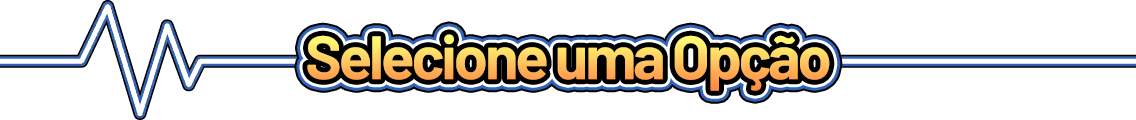
<style>
.page{position:relative;width:1136px;height:120px;background:#ffffff}
.page>*{position:absolute;margin:0}
.t1{font:61.3px "Barlow-Bold";letter-spacing:-0.05em}
</style>
<div class="page">
<p class="t1" style="left:307px;top:34px;width:523px;height:57px">Selecione uma Opção</p>
</div>
